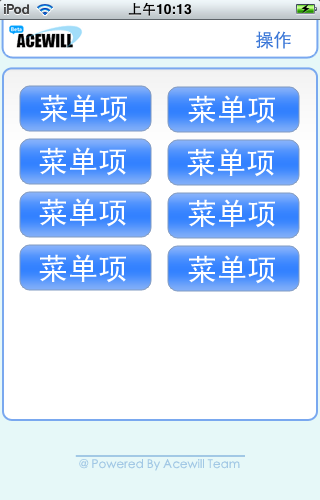
<style>
.page{position:relative;width:320px;height:500px;background:#ffffff}
.page>*{position:absolute;margin:0}
.t1{font:18px "STXihei";color:#3b77d7}
.t2{font:30px "SimHei";color:#ffffff}
.t3{font:12px "STXihei";color:#a2c8e5}
</style>
<div class="page">
<p class="t1" style="left:256px;top:31px;width:35px;height:18px">操作</p>
<p class="t2" style="left:40px;top:94px;width:87px;height:29px">菜单项</p>
<p class="t2" style="left:188px;top:95px;width:87px;height:29px">菜单项</p>
<p class="t2" style="left:39px;top:147px;width:87px;height:29px">菜单项</p>
<p class="t2" style="left:187px;top:148px;width:87px;height:29px">菜单项</p>
<p class="t2" style="left:39px;top:198px;width:87px;height:29px">菜单项</p>
<p class="t2" style="left:188px;top:199px;width:87px;height:29px">菜单项</p>
<p class="t2" style="left:39px;top:254px;width:87px;height:29px">菜单项</p>
<p class="t2" style="left:188px;top:255px;width:87px;height:29px">菜单项</p>
<p class="t3" style="left:79px;top:459px;width:161px;height:12px">@ Powered By Acewill Team</p>
</div>
